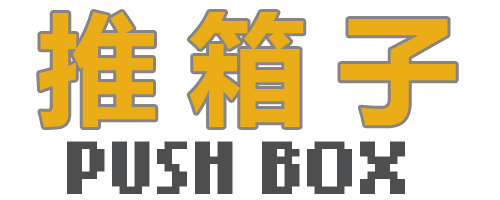
<style>
.page{position:relative;width:500px;height:200px;background:#ffffff}
.page>*{position:absolute;margin:0}
.t1{font:120px "MicrosoftYaHei-Bold";letter-spacing:0.25em;color:#eaac17}
.t2{font:60px "NokiaCellphoneFC-Small";color:#4d4e4f}
</style>
<div class="page">
<p class="t1" style="left:39px;top:12px;width:417px;height:115px">推箱子</p>
<p class="t2" style="left:67px;top:141px;width:338px;height:53px">PUSH BOX</p>
</div>
